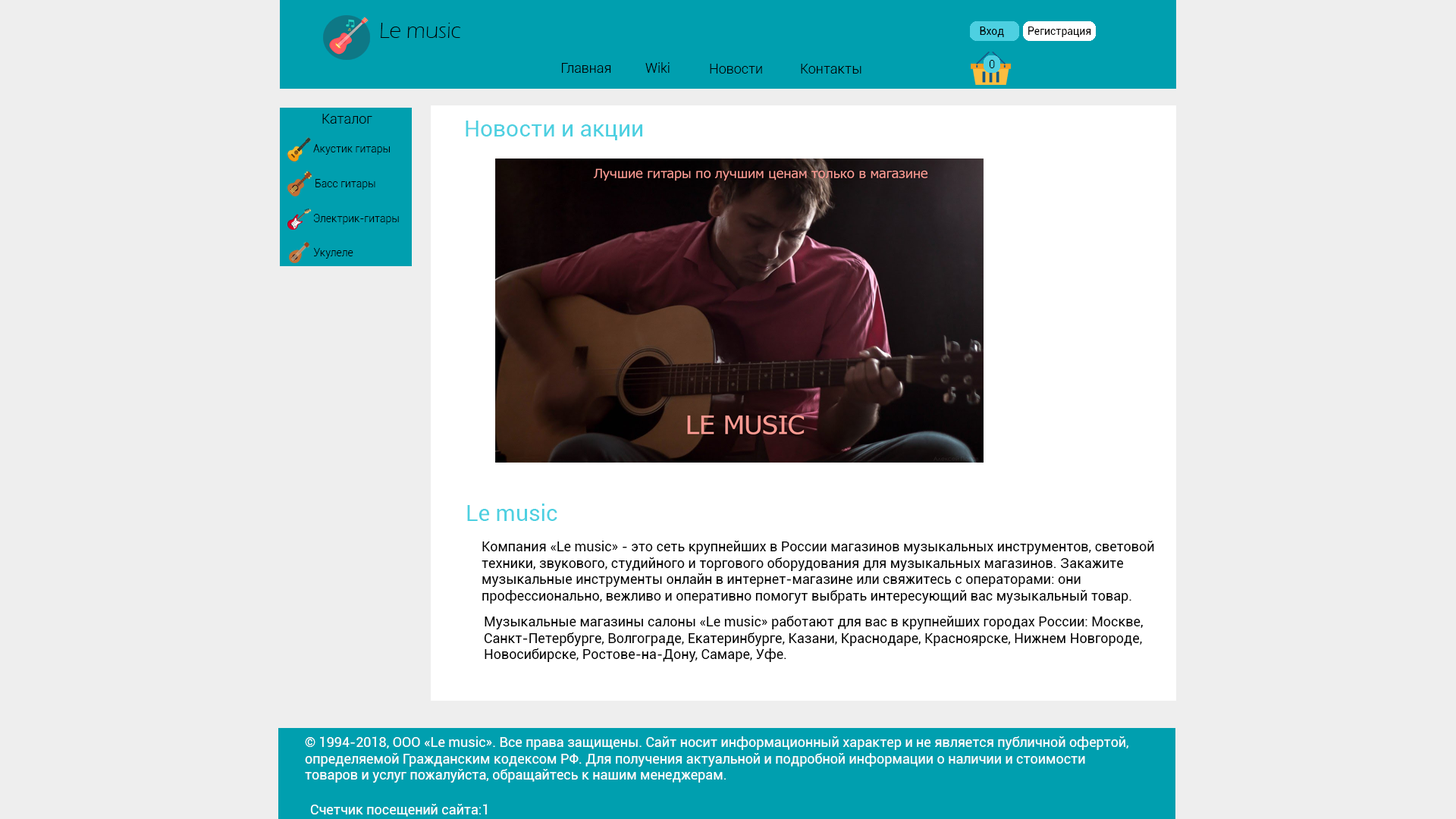
<style>
.page{position:relative;width:1456px;height:819px;background:#eeeeee}
.page>*{position:absolute;margin:0}
.t1{font:22.7px "ErasITC-Light";color:#000000}
.t2{font:10.6px "Roboto-Regular";color:#000000}
.t3{font:13.6px "Roboto-Light";color:#000000}
.t4{font:10.6px "Roboto-Light";color:#000000}
.t5{font:22.7px "Roboto-Regular";color:#4dd0e1}
.t6{font:13.6px "Roboto-Regular";color:#000000}
.t7{font:13.6px "Roboto-Regular";color:#ffffff}
</style>
<div class="page">
<p class="t1" style="left:381px;top:23px;width:80px;height:15px">Le music</p>
<p class="t2" style="left:980px;top:27px;width:24px;height:10px">Вход</p>
<p class="t2" style="left:1028px;top:27px;width:63px;height:10px">Регистрация</p>
<p class="t3" style="left:562px;top:63px;width:49px;height:10px">Главная</p>
<p class="t3" style="left:645px;top:62px;width:25px;height:11px">Wiki</p>
<p class="t3" style="left:710px;top:64px;width:52px;height:10px">Новости</p>
<p class="t3" style="left:801px;top:64px;width:60px;height:10px">Контакты</p>
<p class="t4" style="left:989px;top:60px;width:6px;height:8px">0</p>
<p class="t3" style="left:322px;top:114px;width:50px;height:10px">Каталог</p>
<p class="t5" style="left:466px;top:121px;width:176px;height:19px">Новости и акции</p>
<p class="t4" style="left:313px;top:144px;width:77px;height:11px">Акустик гитары</p>
<p class="t4" style="left:315px;top:179px;width:60px;height:11px">Басс гитары</p>
<p class="t4" style="left:314px;top:214px;width:85px;height:10px">Электрик-гитары</p>
<p class="t4" style="left:313px;top:248px;width:40px;height:11px">Укулеле</p>
<p class="t5" style="left:467px;top:504px;width:90px;height:17px">Le music</p>
<p class="t6" style="left:482px;top:541px;width:672px;height:63px;text-align:right">Компания «Le music» - это сеть крупнейших в России магазинов музыкальных инструментов, световой <br>техники, звукового, студийного и торгового оборудования для музыкальных магазинов. Закажите <br>музыкальные инструменты онлайн в интернет-магазине или свяжитесь с операторами: они <br>профессионально, вежливо и оперативно помогут выбрать интересующий вас музыкальный товар.</p>
<p class="t6" style="left:484px;top:616px;width:659px;height:46px;text-align:right">Музыкальные магазины салоны «Le music» работают для вас в крупнейших городах России: Москве, <br>Санкт-Петербурге, Волгограде, Екатеринбурге, Казани, Краснодаре, Красноярске, Нижнем Новгороде, <br>Новосибирске, Ростове-на-Дону, Самаре, Уфе.</p>
<p class="t7" style="left:305px;top:736px;width:823px;height:47px;text-align:right">© 1994-2018, ООО «Le music». Все права защищены. Сайт носит информационный характер и не является публичной офертой, <br>определяемой Гражданским кодексом РФ. Для получения актуальной и подробной информации о наличии и стоимости <br>товаров и услуг пожалуйста, обращайтесь к нашим менеджерам.</p>
<p class="t7" style="left:310px;top:804px;width:177px;height:13px">Счетчик посещений сайта:1</p>
</div>
